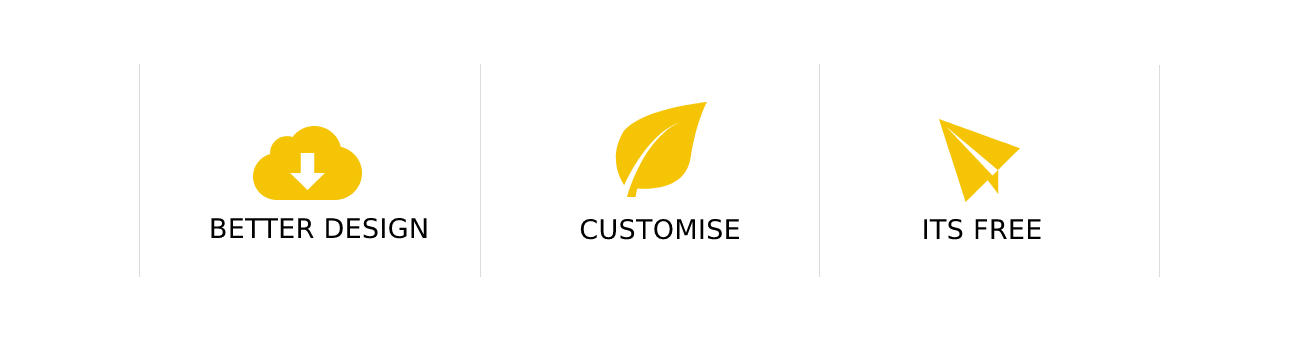
<style>
.page{position:relative;width:1300px;height:342px;background:#ffffff}
.page>*{position:absolute;margin:0}
.t1{font:27px "SegoeUI-Light";letter-spacing:0.01em;color:#000000;text-transform:uppercase}
</style>
<div class="page">
<p class="t1" style="left:211px;top:218px;width:216px;height:21px">better design</p>
<p class="t1" style="left:580px;top:219px;width:159px;height:21px">customise</p>
<p class="t1" style="left:924px;top:219px;width:117px;height:21px">Its Free</p>
</div>
